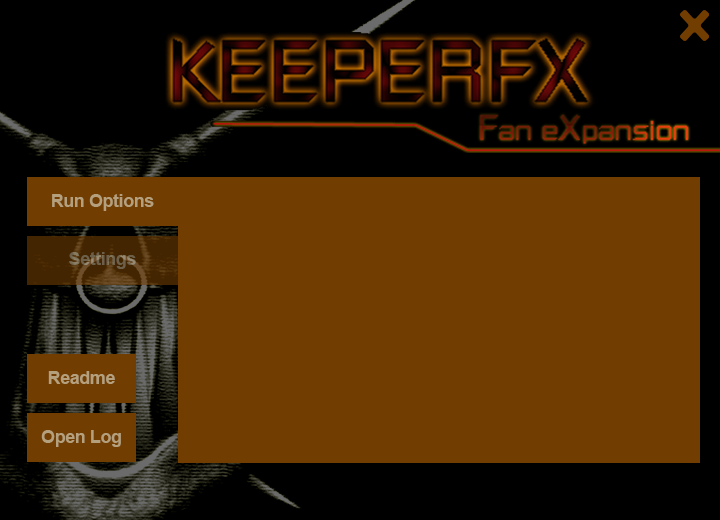
<style>
.page{position:relative;width:720px;height:520px;background:#723d01}
.page>*{position:absolute;margin:0}
.t1{font:18px "Arial-BoldMT";letter-spacing:-0.025em;color:#b4a07c}
.t2{font:18px "Arial-BoldMT";letter-spacing:-0.025em;color:#6d614a}
</style>
<div class="page">
<p class="t1" style="left:52px;top:194px;width:102px;height:17px">Run Options</p>
<p class="t2" style="left:69px;top:252px;width:67px;height:17px">Settings</p>
<p class="t1" style="left:48px;top:371px;width:67px;height:13px">Readme</p>
<p class="t1" style="left:41px;top:430px;width:80px;height:17px">Open Log</p>
</div>
